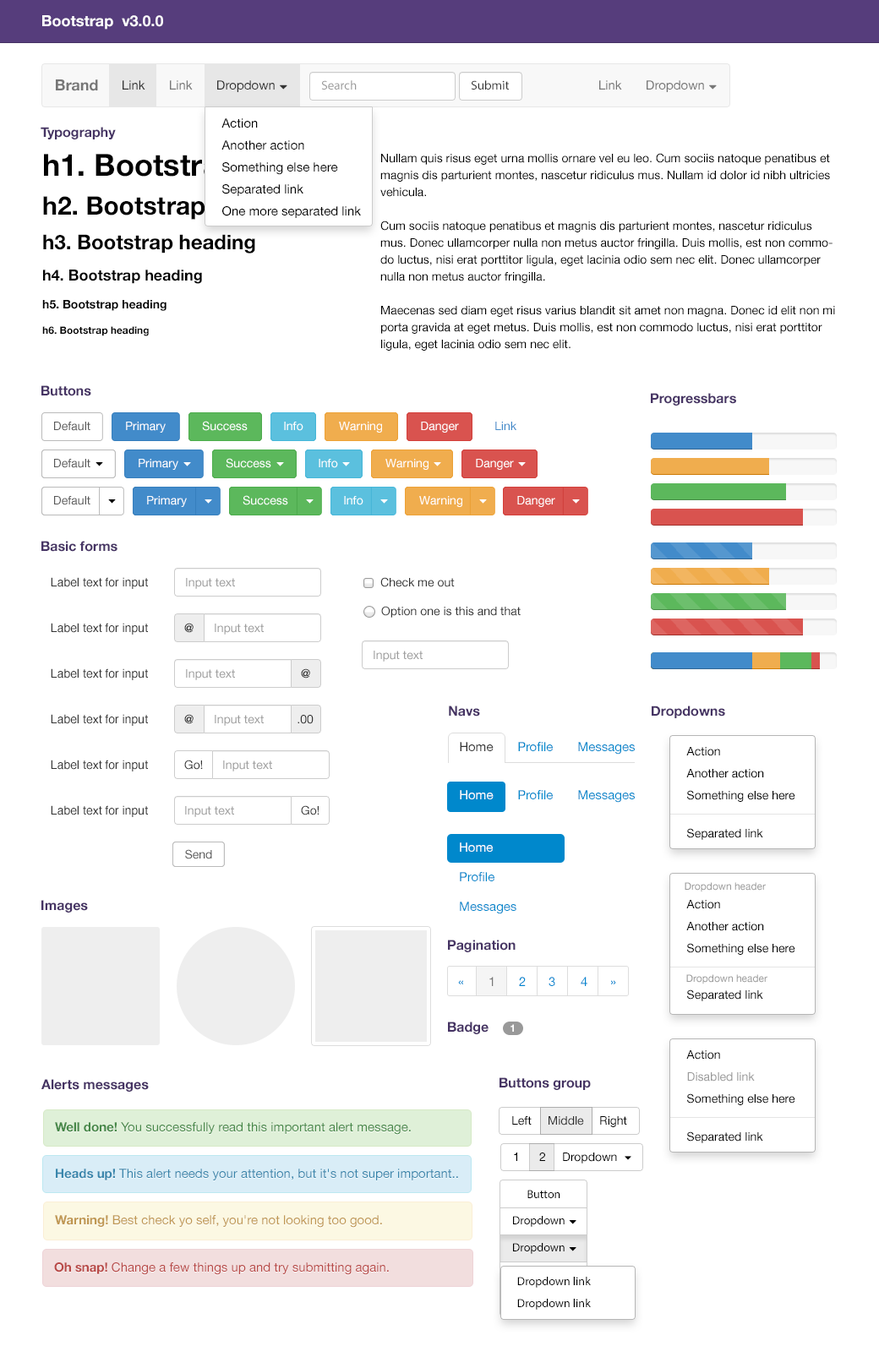
<style>
.page{position:relative;width:879px;height:1357px;background:#ffffff}
.page>*{position:absolute;margin:0}
.t1{font:15.2px "HelveticaNeue-Bold";color:#ffffff}
.t2{font:15.2px "HelveticaNeue-Bold";color:#777777}
.t3{font:12.7px "HelveticaNeue";color:#333333}
.t4{font:12.7px "HelveticaNeue";color:#777777}
.t5{font:12.7px "MyriadPro-Regular";color:#999999}
.t6{font:12.7px "MyriadPro-Regular";color:#333333}
.t7{font:12.7px/22px "HelveticaNeue";color:#000000}
.t8{font:13.5px "HelveticaNeue-Bold";color:#463464}
.t9{font:30.4px "HelveticaNeue-Bold"}
.t10{font:11.8px/16.9px "HelveticaNeue";color:#000000}
.t11{font:25.3px "HelveticaNeue-Bold";color:#010101}
.t12{font:20.3px "HelveticaNeue-Bold";color:#010101}
.t13{font:15.2px "HelveticaNeue-Bold";color:#010101}
.t14{font:11.8px "HelveticaNeue-Bold";color:#010101}
.t15{font:10.1px "HelveticaNeue-Bold";color:#010101}
.t16{font:11.8px "HelveticaNeue";color:#585858}
.t17{font:11.8px "HelveticaNeue";color:#ffffff}
.t18{font:11.8px "HelveticaNeue";color:#428bca}
.t19{font:11.8px "Helvetica";color:#333333}
.t20{font:11.8px "HelveticaNeue";color:#9e9e9e}
.t21{font:11.8px "HelveticaNeue";color:#333333}
.t22{font:11.8px "HelveticaNeue-Bold";color:#333333}
.t23{font:12.7px "HelveticaNeue";color:#0088cc}
.t24{font:11.8px "HelveticaNeue";color:#000000}
.t25{font:12.7px "HelveticaNeue";color:#ffffff}
.t26{font:10.1px "HelveticaNeue";color:#999999}
.t27{font:12.7px "HelveticaNeue";color:#0088d0}
.t28{font:12.7px "HelveticaNeue"}
.t29{font:10.1px "HelveticaNeue-Bold";color:#ffffff}
.t30{font:11.8px "HelveticaNeue";color:#999999}
.t31{font:12.7px "HelveticaNeue";color:#468847}
.t32{font:12.7px "HelveticaNeue-Bold";color:#468847}
.t33{font:12.7px "HelveticaNeue";color:#3a87ad}
.t34{font:12.7px "HelveticaNeue-Bold";color:#3a87ad}
.t35{font:11.8px "MyriadPro-Regular";color:#000000}
.t36{font:12.7px "HelveticaNeue";color:#c09853}
.t37{font:12.7px "HelveticaNeue-Bold";color:#c09853}
.t38{font:12.7px "HelveticaNeue";color:#b94a48}
.t39{font:12.7px "HelveticaNeue-Bold";color:#b94a48}
</style>
<div class="page">
<p class="t1" style="left:42px;top:15px;width:121px;height:15px">Bootstrap  v3.0.0</p>
<p class="t2" style="left:56px;top:79px;width:42px;height:12px">Brand</p>
<p class="t3" style="left:123px;top:80px;width:22px;height:10px">Link</p>
<p class="t4" style="left:170px;top:80px;width:23px;height:10px">Link</p>
<p class="t3" style="left:217px;top:80px;width:58px;height:12px">Dropdown</p>
<p class="t5" style="left:321px;top:80px;width:36px;height:10px">Search</p>
<p class="t6" style="left:471px;top:80px;width:38px;height:10px">Submit</p>
<p class="t4" style="left:599px;top:80px;width:23px;height:10px">Link</p>
<p class="t4" style="left:646px;top:80px;width:58px;height:12px">Dropdown</p>
<p class="t7" style="left:221px;top:118px;width:140px;height:100px">Action<br>Another action<br>Something else here<br>Separated link<br>One more separated link</p>
<p class="t8" style="left:41px;top:127px;width:75px;height:12px">Typography</p>
<p class="t9" style="left:44px;top:154px;width:317px;height:28px">h1. Bootstrap heading</p>
<p class="t10" style="left:380px;top:153px;width:455px;height:198px">Nullam quis risus eget urna mollis ornare vel eu leo. Cum sociis natoque penatibus et magnis dis parturient montes, nascetur ridiculus mus. Nullam id dolor id nibh ultricies vehicula.<br><br>Cum sociis natoque penatibus et magnis dis parturient montes, nascetur ridiculus mus. Donec ullamcorper nulla non metus auctor fringilla. Duis mollis, est non commodo luctus, nisi erat porttitor ligula, eget lacinia odio sem nec elit. Donec ullamcorper nulla non metus auctor fringilla.<br><br>Maecenas sed diam eget risus varius blandit sit amet non magna. Donec id elit non mi porta gravida at eget metus. Duis mollis, est non commodo luctus, nisi erat porttitor ligula, eget lacinia odio sem nec elit.</p>
<p class="t11" style="left:43px;top:196px;width:265px;height:24px">h2. Bootstrap heading</p>
<p class="t12" style="left:43px;top:234px;width:212px;height:19px">h3. Bootstrap heading</p>
<p class="t13" style="left:43px;top:270px;width:159px;height:14px">h4. Bootstrap heading</p>
<p class="t14" style="left:42px;top:300px;width:124px;height:11px">h5. Bootstrap heading</p>
<p class="t15" style="left:42px;top:326px;width:107px;height:10px">h6. Bootstrap heading</p>
<p class="t8" style="left:41px;top:385px;width:50px;height:11px">Buttons</p>
<p class="t8" style="left:651px;top:393px;width:85px;height:13px">Progressbars</p>
<p class="t16" style="left:54px;top:422px;width:36px;height:9px">Default</p>
<p class="t17" style="left:126px;top:422px;width:40px;height:11px">Primary</p>
<p class="t17" style="left:202px;top:421px;width:46px;height:10px">Success</p>
<p class="t17" style="left:284px;top:422px;width:19px;height:9px">Info</p>
<p class="t17" style="left:339px;top:422px;width:43px;height:11px">Warning</p>
<p class="t17" style="left:421px;top:422px;width:38px;height:11px">Danger</p>
<p class="t18" style="left:495px;top:422px;width:21px;height:8px">Link</p>
<p class="t16" style="left:54px;top:459px;width:36px;height:9px">Default</p>
<p class="t17" style="left:139px;top:459px;width:39px;height:11px">Primary</p>
<p class="t17" style="left:226px;top:458px;width:45px;height:10px">Success</p>
<p class="t17" style="left:319px;top:459px;width:19px;height:9px">Info</p>
<p class="t17" style="left:385px;top:459px;width:43px;height:11px">Warning</p>
<p class="t17" style="left:476px;top:459px;width:38px;height:11px">Danger</p>
<p class="t16" style="left:54px;top:496px;width:36px;height:9px">Default</p>
<p class="t17" style="left:147px;top:496px;width:40px;height:11px">Primary</p>
<p class="t17" style="left:242px;top:495px;width:46px;height:10px">Success</p>
<p class="t17" style="left:344px;top:496px;width:19px;height:9px">Info</p>
<p class="t17" style="left:419px;top:496px;width:43px;height:11px">Warning</p>
<p class="t17" style="left:517px;top:496px;width:38px;height:11px">Danger</p>
<p class="t8" style="left:41px;top:541px;width:76px;height:11px">Basic forms</p>
<p class="t19" style="left:51px;top:577px;width:97px;height:12px">Label text for input</p>
<p class="t20" style="left:186px;top:578px;width:49px;height:11px">Input text</p>
<p class="t21" style="left:380px;top:577px;width:75px;height:10px">Check me out</p>
<p class="t21" style="left:381px;top:606px;width:139px;height:12px">Option one is this and that</p>
<p class="t19" style="left:51px;top:623px;width:97px;height:12px">Label text for input</p>
<p class="t22" style="left:184px;top:623px;width:9px;height:10px">@</p>
<p class="t20" style="left:215px;top:624px;width:49px;height:11px">Input text</p>
<p class="t20" style="left:373px;top:651px;width:49px;height:11px">Input text</p>
<p class="t19" style="left:51px;top:668px;width:97px;height:12px">Label text for input</p>
<p class="t20" style="left:186px;top:669px;width:49px;height:11px">Input text</p>
<p class="t22" style="left:301px;top:668px;width:9px;height:10px">@</p>
<p class="t19" style="left:51px;top:714px;width:97px;height:12px">Label text for input</p>
<p class="t22" style="left:184px;top:714px;width:9px;height:10px">@</p>
<p class="t8" style="left:449px;top:706px;width:31px;height:11px">Navs</p>
<p class="t8" style="left:651px;top:706px;width:74px;height:12px">Dropdowns</p>
<p class="t20" style="left:215px;top:715px;width:49px;height:11px">Input text</p>
<p class="t21" style="left:297px;top:715px;width:16px;height:9px">.00</p>
<p class="t3" style="left:460px;top:742px;width:33px;height:9px">Home</p>
<p class="t23" style="left:518px;top:742px;width:35px;height:9px">Profile</p>
<p class="t23" style="left:578px;top:742px;width:57px;height:13px">Messages</p>
<p class="t24" style="left:686px;top:747px;width:34px;height:9px">Action</p>
<p class="t19" style="left:51px;top:760px;width:97px;height:11px">Label text for input</p>
<p class="t21" style="left:184px;top:760px;width:19px;height:10px">Go!</p>
<p class="t20" style="left:223px;top:760px;width:49px;height:11px">Input text</p>
<p class="t24" style="left:686px;top:769px;width:78px;height:9px">Another action</p>
<p class="t25" style="left:460px;top:790px;width:33px;height:9px">Home</p>
<p class="t23" style="left:518px;top:790px;width:35px;height:9px">Profile</p>
<p class="t23" style="left:578px;top:790px;width:57px;height:13px">Messages</p>
<p class="t24" style="left:687px;top:790px;width:108px;height:12px">Something else here</p>
<p class="t19" style="left:51px;top:805px;width:97px;height:12px">Label text for input</p>
<p class="t20" style="left:185px;top:806px;width:49px;height:11px">Input text</p>
<p class="t21" style="left:301px;top:805px;width:18px;height:10px">Go!</p>
<p class="t24" style="left:687px;top:828px;width:76px;height:12px">Separated link</p>
<p class="t16" style="left:185px;top:849px;width:27px;height:10px">Send</p>
<p class="t26" style="left:684px;top:882px;width:82px;height:10px">Dropdown header</p>
<p class="t8" style="left:41px;top:900px;width:47px;height:13px">Images</p>
<p class="t24" style="left:686px;top:900px;width:34px;height:9px">Action</p>
<p class="t24" style="left:686px;top:922px;width:78px;height:9px">Another action</p>
<p class="t8" style="left:448px;top:940px;width:67px;height:12px">Pagination</p>
<p class="t24" style="left:687px;top:943px;width:108px;height:12px">Something else here</p>
<p class="t4" style="left:489px;top:977px;width:4px;height:9px">1</p>
<p class="t27" style="left:519px;top:977px;width:7px;height:9px">2</p>
<p class="t27" style="left:548px;top:977px;width:7px;height:9px">3</p>
<p class="t27" style="left:580px;top:977px;width:7px;height:9px">4</p>
<p class="t26" style="left:686px;top:974px;width:81px;height:10px">Dropdown header</p>
<p class="t28" style="left:458px;top:980px;width:5px;height:5px">«</p>
<p class="t28" style="left:611px;top:980px;width:5px;height:5px">»</p>
<p class="t24" style="left:687px;top:989px;width:76px;height:12px">Separated link</p>
<p class="t8" style="left:448px;top:1022px;width:40px;height:12px">Badge</p>
<p class="t29" style="left:510px;top:1024px;width:4px;height:8px">1</p>
<p class="t24" style="left:686px;top:1050px;width:34px;height:10px">Action</p>
<p class="t30" style="left:687px;top:1072px;width:68px;height:10px">Disabled link</p>
<p class="t8" style="left:41px;top:1079px;width:108px;height:13px">Alerts messages</p>
<p class="t8" style="left:499px;top:1077px;width:92px;height:13px">Buttons group</p>
<p class="t24" style="left:687px;top:1093px;width:108px;height:12px">Something else here</p>
<p class="t24" style="left:512px;top:1116px;width:19px;height:9px">Left</p>
<p class="t24" style="left:512px;top:1116px;width:19px;height:9px">Left</p>
<p class="t21" style="left:548px;top:1116px;width:36px;height:9px">Middle</p>
<p class="t21" style="left:548px;top:1116px;width:36px;height:9px">Middle</p>
<p class="t24" style="left:600px;top:1116px;width:27px;height:11px">Right</p>
<p class="t24" style="left:600px;top:1116px;width:27px;height:11px">Right</p>
<p class="t31" style="left:55px;top:1122px;width:356px;height:13px"><span class="t32">Well done! </span>You successfully read this important alert message.</p>
<p class="t24" style="left:687px;top:1131px;width:76px;height:12px">Separated link</p>
<p class="t24" style="left:514px;top:1153px;width:3px;height:8px">1</p>
<p class="t24" style="left:514px;top:1153px;width:3px;height:8px">1</p>
<p class="t24" style="left:539px;top:1153px;width:6px;height:8px">2</p>
<p class="t24" style="left:539px;top:1153px;width:6px;height:8px">2</p>
<p class="t24" style="left:563px;top:1153px;width:54px;height:10px">Dropdown</p>
<p class="t24" style="left:563px;top:1153px;width:54px;height:10px">Dropdown</p>
<p class="t33" style="left:56px;top:1169px;width:402px;height:11px"><span class="t34">Heads up! </span>This alert needs your attention, but it's not super important..</p>
<p class="t35" style="left:527px;top:1190px;width:33px;height:8px">Button</p>
<p class="t36" style="left:55px;top:1215px;width:327px;height:13px"><span class="t37">Warning! </span>Best check yo self, you're not looking too good.</p>
<p class="t35" style="left:513px;top:1216px;width:51px;height:11px">Dropdown</p>
<p class="t35" style="left:513px;top:1243px;width:51px;height:11px">Dropdown</p>
<p class="t35" style="left:513px;top:1243px;width:51px;height:11px">Dropdown</p>
<p class="t38" style="left:54px;top:1262px;width:335px;height:13px"><span class="t39">Oh snap! </span>Change a few things up and try submitting again.</p>
<p class="t35" style="left:517px;top:1277px;width:74px;height:11px">Dropdown link</p>
<p class="t35" style="left:517px;top:1299px;width:74px;height:11px">Dropdown link</p>
</div>
